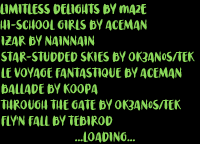
<style>
.page{position:relative;width:200px;height:144px;background:#000000}
.page>*{position:absolute;margin:0}
.t1{font:12px "ChubbyBoys";color:#89d758}
</style>
<div class="page">
<p class="t1" style="left:0px;top:3px;width:147px;height:12px">LIMITLESS DELIGHTS BY mA2E</p>
<p class="t1" style="left:0px;top:19px;width:147px;height:12px">HI-SCHOOL GIRLS BY ACEMAN</p>
<p class="t1" style="left:1px;top:35px;width:94px;height:12px">IZAR BY NAINNAIN</p>
<p class="t1" style="left:1px;top:51px;width:194px;height:12px">STAR-STUDDED SKIES BY OK3AN0S/TEK</p>
<p class="t1" style="left:1px;top:67px;width:181px;height:12px">LE VOYAGE FANTASTIQUE BY ACEMAN</p>
<p class="t1" style="left:1px;top:83px;width:97px;height:12px">BALLADE BY KOOPA</p>
<p class="t1" style="left:0px;top:99px;width:181px;height:12px">THROUGH THE GATE BY OK3AN0S/TEK</p>
<p class="t1" style="left:1px;top:115px;width:112px;height:12px">FLY'N FALL BY TEBIROD</p>
<p class="t1" style="left:75px;top:131px;width:60px;height:12px">...LOADING...</p>
</div>
